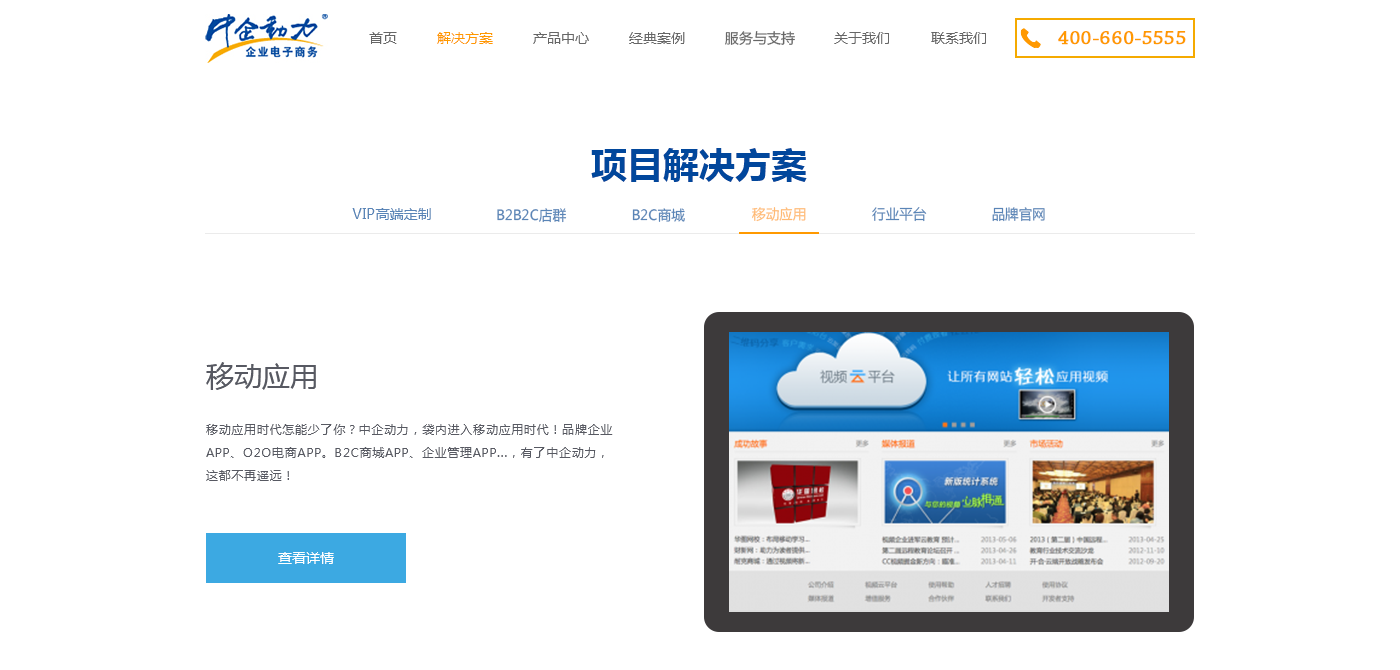
<style>
.page{position:relative;width:1400px;height:670px;background:#ffffff}
.page>*{position:absolute;margin:0}
.t1{font:14px "MicrosoftYaHei";color:#666666}
.t2{font:14px "MicrosoftYaHei";color:#ff9900}
.t3{font:20px "ChaparralPro-Regular";color:#ff9900;font-weight:bold}
.t4{font:36px "MicrosoftYaHei-Bold";color:#01479c}
.t5{font:14px "MicrosoftYaHei";color:#5a85b7}
.t6{font:14px "MicrosoftYaHei";color:#5a85b7;scale:0.97 1}
.t7{font:14px "MicrosoftYaHei";color:#ffba73;scale:0.97 1}
.t8{font:28px "MicrosoftYaHei";color:#575962}
.t9{font:12px/23px "MicrosoftYaHei";letter-spacing:0.06em;color:#575962}
.t10{font:14px "MicrosoftYaHei";color:#ffffff}
</style>
<div class="page">
<p class="t1" style="left:369px;top:32px;width:28px;height:12px">首页</p>
<p class="t2" style="left:437px;top:32px;width:56px;height:12px">解决方案</p>
<p class="t1" style="left:533px;top:32px;width:56px;height:12px">产品中心</p>
<p class="t1" style="left:629px;top:32px;width:56px;height:12px">经典案例</p>
<p class="t1" style="left:725px;top:31px;width:70px;height:14px">服务与支持</p>
<p class="t1" style="left:834px;top:32px;width:55px;height:12px">关于我们</p>
<p class="t1" style="left:931px;top:32px;width:55px;height:12px">联系我们</p>
<p class="t3" style="left:1058px;top:31px;width:128px;height:14px">400-660-5555</p>
<p class="t4" style="left:591px;top:148px;width:216px;height:34px">项目解决方案</p>
<p class="t5" style="left:352px;top:208px;width:79px;height:12px">VIP高端定制</p>
<p class="t6" style="left:497px;top:208px;width:70px;height:15px">B2B2C店群</p>
<p class="t6" style="left:632px;top:208px;width:53px;height:14px">B2C商城</p>
<p class="t7" style="left:752px;top:207px;width:54px;height:15px">移动应用</p>
<p class="t6" style="left:872px;top:207px;width:55px;height:15px">行业平台</p>
<p class="t6" style="left:992px;top:207px;width:53px;height:15px">品牌官网</p>
<p class="t8" style="left:206px;top:362px;width:110px;height:28px">移动应用</p>
<p class="t9" style="left:206px;top:424px;width:407px;height:57px">移动应用时代怎能少了你？中企动力，袋内进入移动应用时代！品牌企业<br>APP、O2O电商APP。B2C商城APP、企业管理APP...，有了中企动力，<br>这都不再遥远！</p>
<p class="t10" style="left:278px;top:552px;width:56px;height:12px">查看详情</p>
</div>
